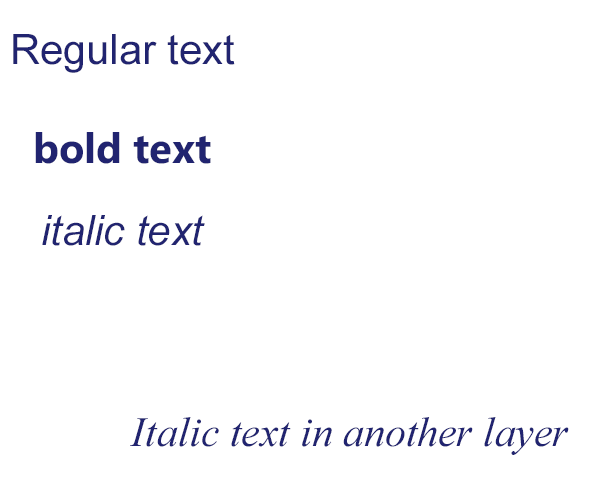
<style>
.page{position:relative;width:600px;height:500px;background:#ffffff}
.page>*{position:absolute;margin:0}
.t1{font:41.7px/82.3px "ArialMT";color:#212470}
.t2{font:41.7px/82.3px "SegoeUI-Bold";color:#212470}
.t3{font:41.7px/82.3px "Arial-ItalicMT";color:#212470}
.t4{font:41.7px "TimesNewRomanPS-ItalicMT";color:#212470}
</style>
<div class="page">
<p class="t1" style="left:13px;top:34px;width:222px;height:212px;text-align:center">Regular text<br><span class="t2">bold text<br></span><span class="t3">italic text</span></p>
<p class="t4" style="left:130px;top:417px;width:439px;height:38px">Italic text in another layer</p>
</div>
